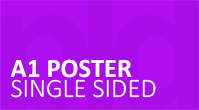
<style>
.page{position:relative;width:199px;height:110px;background:#a80de8}
.page>*{position:absolute;margin:0}
.t1{font:26.6px "Calibri-Bold";color:#ffffff}
.t2{font:26.6px "Calibri-Light";color:#ffffff}
</style>
<div class="page">
<p class="t1" style="left:10px;top:59px;width:122px;height:19px">A1 POSTER</p>
<p class="t2" style="left:11px;top:79px;width:145px;height:19px">SINGLE SIDED</p>
</div>
